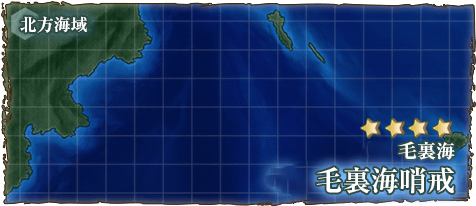
<style>
.page{position:relative;width:476px;height:206px}
.page>*{position:absolute;margin:0}
.t1{font:17px "RyuminPr6N-ExBold";color:#ffffff}
.t2{font:19px "RyuminPro-ExBold";color:#ffffff}
.t3{font:28px "RyuminPro-ExBold";color:#ffffff}
</style>
<div class="page">
<p class="t1" style="left:20px;top:16px;width:67px;height:17px">北方海域</p>
<p class="t2" style="left:398px;top:141px;width:57px;height:19px">毛裏海</p>
<p class="t3" style="left:316px;top:167px;width:138px;height:27px">毛裏海哨戒</p>
</div>
